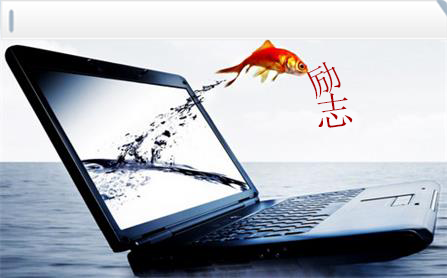
<style>
.page{position:relative;width:447px;height:278px}
.page>*{position:absolute;margin:0}
.t1{font:33.3px "SimSun";letter-spacing:0.005em;color:#aa0000}
.t2{font:40px "SimSun";letter-spacing:0.005em;color:#aa0000}
</style>
<div class="page">
<p class="t1" style="left:306px;top:62px;width:35px;height:37px;rotate:-26deg">励</p>
<p class="t2" style="left:317px;top:93px;width:36px;height:35px;rotate:-8deg">志</p>
</div>
